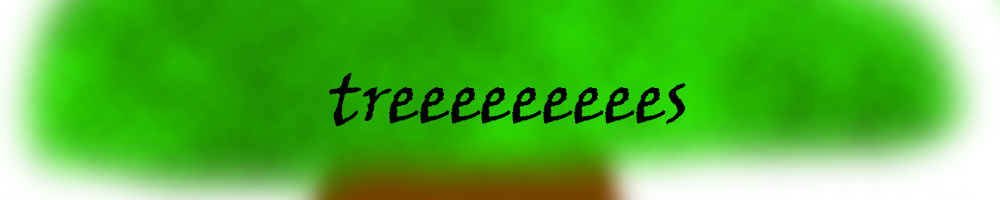
<style>
.page{position:relative;width:1000px;height:200px}
.page>*{position:absolute;margin:0}
.t1{font:72px "VinerHandITC";color:#000000}
</style>
<div class="page">
<p class="t1" style="left:329px;top:72px;width:357px;height:55px">treeeeeeeees</p>
</div>
